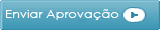
<style>
.page{position:relative;width:160px;height:30px}
.page>*{position:absolute;margin:0}
.t1{font:11.2px "CenturyGothic";color:#ffffff;scale:1.16 1}
</style>
<div class="page">
<p class="t1" style="left:6px;top:9px;width:113px;height:11px">Enviar Aprovação</p>
</div>
